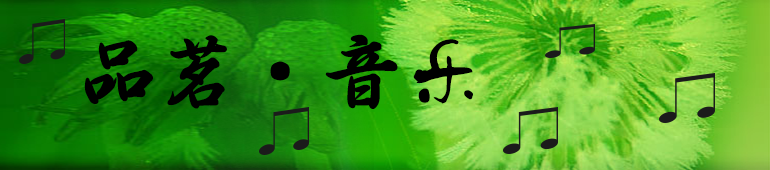
<style>
.page{position:relative;width:770px;height:170px}
.page>*{position:absolute;margin:0}
.t1{font:80px "´ºÁª±ê×¼ÐÐÊéÌå";color:#000000;font-weight:bold}
.t2{font:80px "SimSun";color:#000000;font-weight:bold}
.t3{font:80px "FZZJ-TTMBFONT";color:#000000;font-weight:bold}
</style>
<div class="page">
<p class="t1" style="left:84px;top:34px;width:389px;height:75px">品茗<span class="t2">·</span>音<span class="t3">乐</span></p>
</div>
